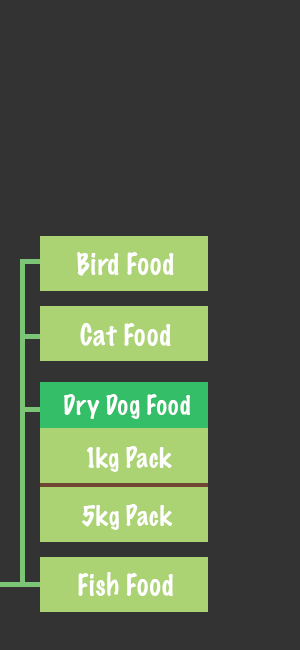
<style>
.page{position:relative;width:300px;height:650px;background:#333333}
.page>*{position:absolute;margin:0}
.t1{font:27.1px "MarkerFelt-Thin";color:#ffffff}
.t2{font:25px "MarkerFelt-Thin";color:#ffffff}
</style>
<div class="page">
<p class="t1" style="left:77px;top:252px;width:97px;height:24px">Bird Food</p>
<p class="t1" style="left:80px;top:323px;width:91px;height:23px">Cat Food</p>
<p class="t2" style="left:64px;top:394px;width:126px;height:25px">Dry Dog Food</p>
<p class="t2" style="left:87px;top:446px;width:85px;height:26px">1kg Pack</p>
<p class="t2" style="left:82px;top:504px;width:90px;height:26px">5kg Pack</p>
<p class="t1" style="left:78px;top:572px;width:95px;height:24px">Fish Food</p>
</div>
